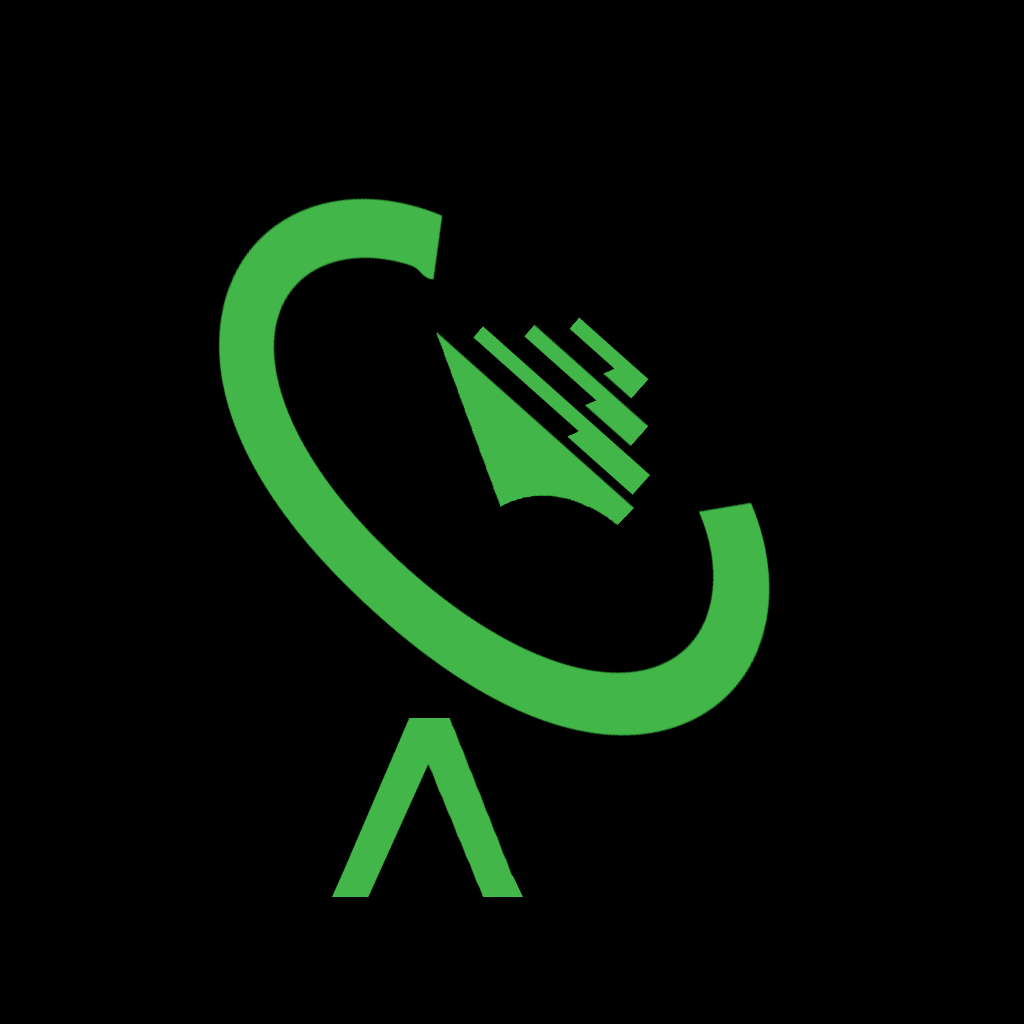
<style>
.page{position:relative;width:1024px;height:1024px;background:#000000}
.page>*{position:absolute;margin:0}
.t1{font:881.8px "Inconsolata-dz";color:#42b649;scale:0.78 1}
.t2{font:654.1px "Inconsolata-dz";color:#42b649;scale:0.73 1}
</style>
<div class="page">
<p class="t1" style="left:218px;top:197px;width:553px;height:540px;rotate:-50deg">C</p>
<p class="t2" style="left:340px;top:682px;width:173px;height:216px;rotate:-1deg">^</p>
</div>
